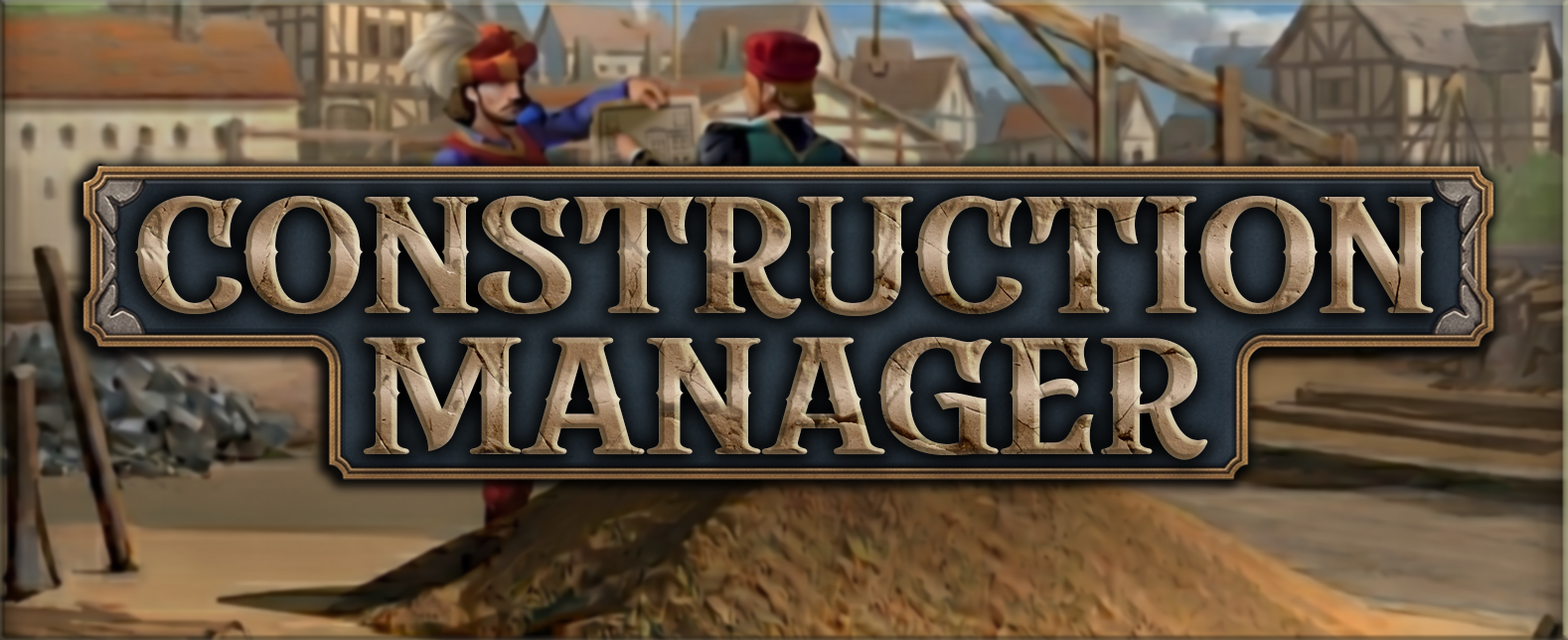
<style>
.page{position:relative;width:1568px;height:640px}
.page>*{position:absolute;margin:0}
.t1{font:184.1px "StanfordBreath-Regular";scale:1.36 1}
</style>
<div class="page">
<p class="t1" style="left:134px;top:196px;width:1300px;height:123px">construction</p>
<p class="t1" style="left:363px;top:337px;width:845px;height:123px">manager</p>
</div>
